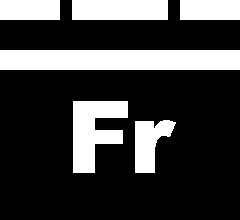
<style>
.page{position:relative;width:240px;height:220px;background:#000000}
.page>*{position:absolute;margin:0}
.t1{font:12px "Arial-Black";color:#ffffff}
</style>
<div class="page">
<p class="t1" style="left:73px;top:101px;width:103px;height:72px;text-align:center">Fr</p>
</div>
